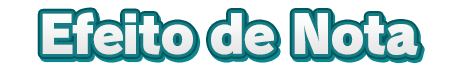
<style>
.page{position:relative;width:460px;height:72px;background:#ffffff}
.page>*{position:absolute;margin:0}
.t1{font:52px "RodinPro-UB";letter-spacing:-0.039em;color:#f1f1f2}
</style>
<div class="page">
<p class="t1" style="left:42px;top:12px;width:376px;height:43px">Efeito de Nota</p>
</div>
